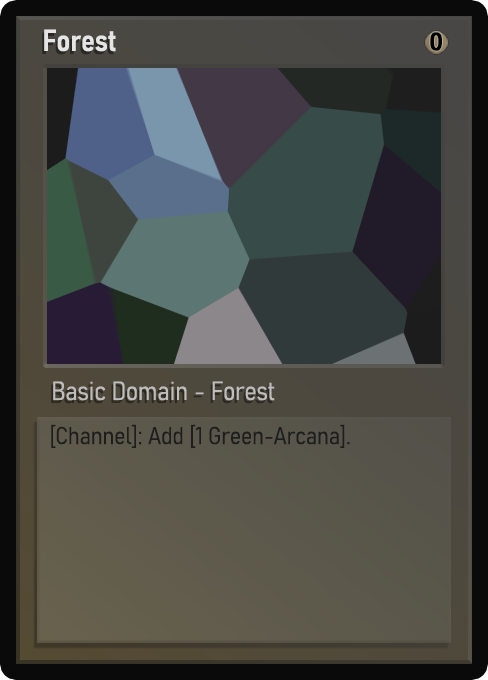
<style>
.page{position:relative;width:488px;height:680px}
.page>*{position:absolute;margin:0}
.t1{font:30px "Bahnschrift-SemiBoldSemiCondensed";color:#f2f2f2;font-weight:bold}
.t2{font:25px "WTRRoycroft";color:#000000;font-weight:bold;scale:1.09 1}
.t3{font:26px "Bahnschrift-LightSemiCondensed";color:#c8c8c8;font-weight:bold}
.t4{font:24px "Bahnschrift-LightSemiCondensed";color:#1e1e1e;font-weight:bold}
</style>
<div class="page">
<p class="t1" style="left:44px;top:29px;width:72px;height:23px;opacity:0.9">Forest</p>
<p class="t2" style="left:430px;top:32px;width:12px;height:19px">0</p>
<p class="t3" style="left:53px;top:381px;width:222px;height:20px;opacity:0.9">Basic Domain - Forest</p>
<p class="t4" style="left:51px;top:424px;width:299px;height:24px">[Channel]: Add [1 Green-Arcana].</p>
</div>
